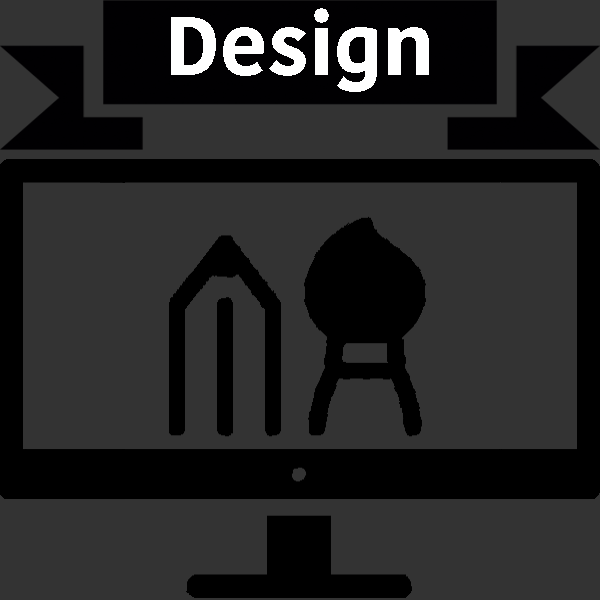
<style>
.page{position:relative;width:600px;height:600px;background:#333333}
.page>*{position:absolute;margin:0}
.t1{font:83.3px "KohinoorDevanagari-Bold";color:#ffffff}
</style>
<div class="page">
<p class="t1" style="left:171px;top:8px;width:258px;height:84px">Design</p>
</div>
